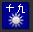
<style>
.page{position:relative;width:33px;height:32px;background:#000090}
.page>*{position:absolute;margin:0}
.t1{font:10.4px "SimSun";color:#ffffff}
</style>
<div class="page">
<p class="t1" style="left:6px;top:4px;width:19px;height:9px">十九</p>
</div>
